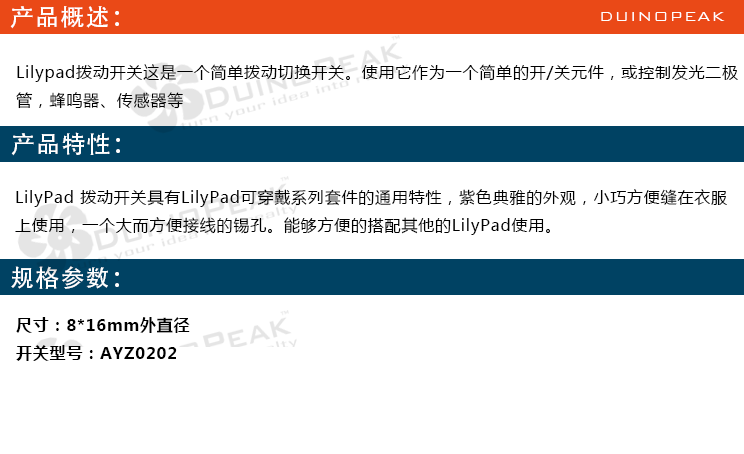
<style>
.page{position:relative;width:744px;height:454px;background:#ffffff}
.page>*{position:absolute;margin:0}
.t1{font:24px "AdobeHeitiStd-Regular";letter-spacing:0.05em;color:#ffffff}
.t2{font:18px "BankGothicBT-Light";letter-spacing:0.05em;color:#ffffff}
.t3{font:16px "MicrosoftYaHei";letter-spacing:0.05em;color:#000000}
.t4{font:16px "MicrosoftYaHei-Bold";letter-spacing:0.05em;color:#000000}
</style>
<div class="page">
<p class="t1" style="left:10px;top:6px;width:109px;height:23px">产品概述：</p>
<p class="t2" style="left:601px;top:12px;width:124px;height:9px">DUINOPEAK</p>
<p class="t3" style="left:16px;top:64px;width:722px;height:45px">Lilypad拨动开关这是一个简单拨动切换开关。使用它作为一个简单的开/关元件，或控制发光二极<br>管，蜂鸣器、传感器等</p>
<p class="t1" style="left:11px;top:132px;width:109px;height:24px">产品特性：</p>
<p class="t3" style="left:15px;top:189px;width:712px;height:46px">LilyPad 拨动开关具有LilyPad可穿戴系列套件的通用特性，紫色典雅的外观，小巧方便缝在衣服<br>上使用，一个大而方便接线的锡孔。能够方便的搭配其他的LilyPad使用。</p>
<p class="t1" style="left:11px;top:266px;width:108px;height:23px">规格参数：</p>
<p class="t4" style="left:16px;top:317px;width:174px;height:44px">尺寸：8*16mm外直径<br>开关型号：AYZ0202</p>
</div>
